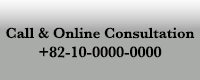
<style>
.page{position:relative;width:200px;height:80px;background:#a9aba8}
.page>*{position:absolute;margin:0}
.t1{font:15px "Baskerville-SemiBold";color:#000000}
.t2{font:14px "Baskerville-Bold";color:#000000}
.t3{font:16px "Baskerville-SemiBold";color:#000000}
</style>
<div class="page">
<p class="t1" style="left:6px;top:27px;width:189px;height:31px;text-align:center"><span class="t2"><br></span>Call &amp; Online Consultation <br><span class="t3">+82-10-0000-0000</span></p>
</div>
